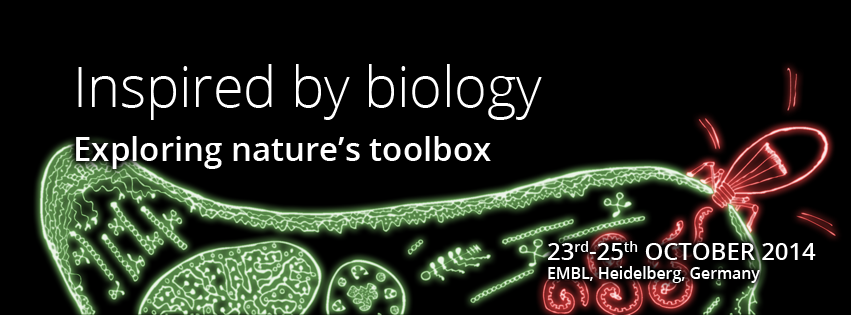
<style>
.page{position:relative;width:851px;height:315px;background:#000000}
.page>*{position:absolute;margin:0}
.t1{font:33px "OpenSans-Semibold";color:#ffffff}
.t2{font:55.5px "OpenSans-Light";color:#ffffff}
.t3{font:15.8px "OpenSans-Semibold";color:#ffffff}
.t4{font:23.9px "OpenSans-Semibold";color:#ffffff}
</style>
<div class="page">
<p class="t1" style="left:76px;top:64px;width:466px;height:105px"><span class="t2">Inspired by biology<br></span>Exploring nature’s toolbox</p>
<p class="t3" style="left:548px;top:241px;width:268px;height:42px"><span class="t4">23rd-25th OCTOBER 2014<br></span>EMBL, Heidelberg, Germany</p>
</div>
